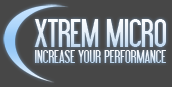
<style>
.page{position:relative;width:172px;height:87px;background:#474747}
.page>*{position:absolute;margin:0}
.t1{font:39.4px "LibelSuit";color:#e6f0f9}
.t2{font:17.7px "LibelSuit"}
</style>
<div class="page">
<p class="t1" style="left:34px;top:19px;width:132px;height:28px">XTREM MICRO</p>
<p class="t2" style="left:35px;top:50px;width:131px;height:13px">INCREASE YOUR PERFORMANCE</p>
</div>
